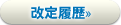
<style>
.page{position:relative;width:121px;height:25px}
.page>*{position:absolute;margin:0}
.t1{font:14px "PS-NOW-GE-83pv-RKSJ-H";letter-spacing:-0.025em;color:#0074b7}
.t2{font:14px "HiraKakuProN-W3";letter-spacing:-0.025em;color:#0074b7}
</style>
<div class="page">
<p class="t1" style="left:31px;top:6px;width:60px;height:14px">改定履歴<span class="t2">»</span></p>
</div>
